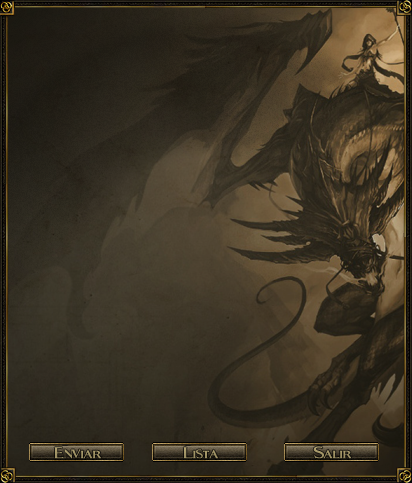
<style>
.page{position:relative;width:412px;height:483px}
.page>*{position:absolute;margin:0}
.t1{font:30px "Fleet-Street";color:#a29466}
.t2{font:30px "Fleet-Street";color:#a19466}
</style>
<div class="page">
<p class="t1" style="left:54px;top:447px;width:48px;height:12px">Enviar</p>
<p class="t2" style="left:183px;top:447px;width:35px;height:12px">Lista</p>
<p class="t1" style="left:313px;top:446px;width:39px;height:13px">Salir</p>
</div>
